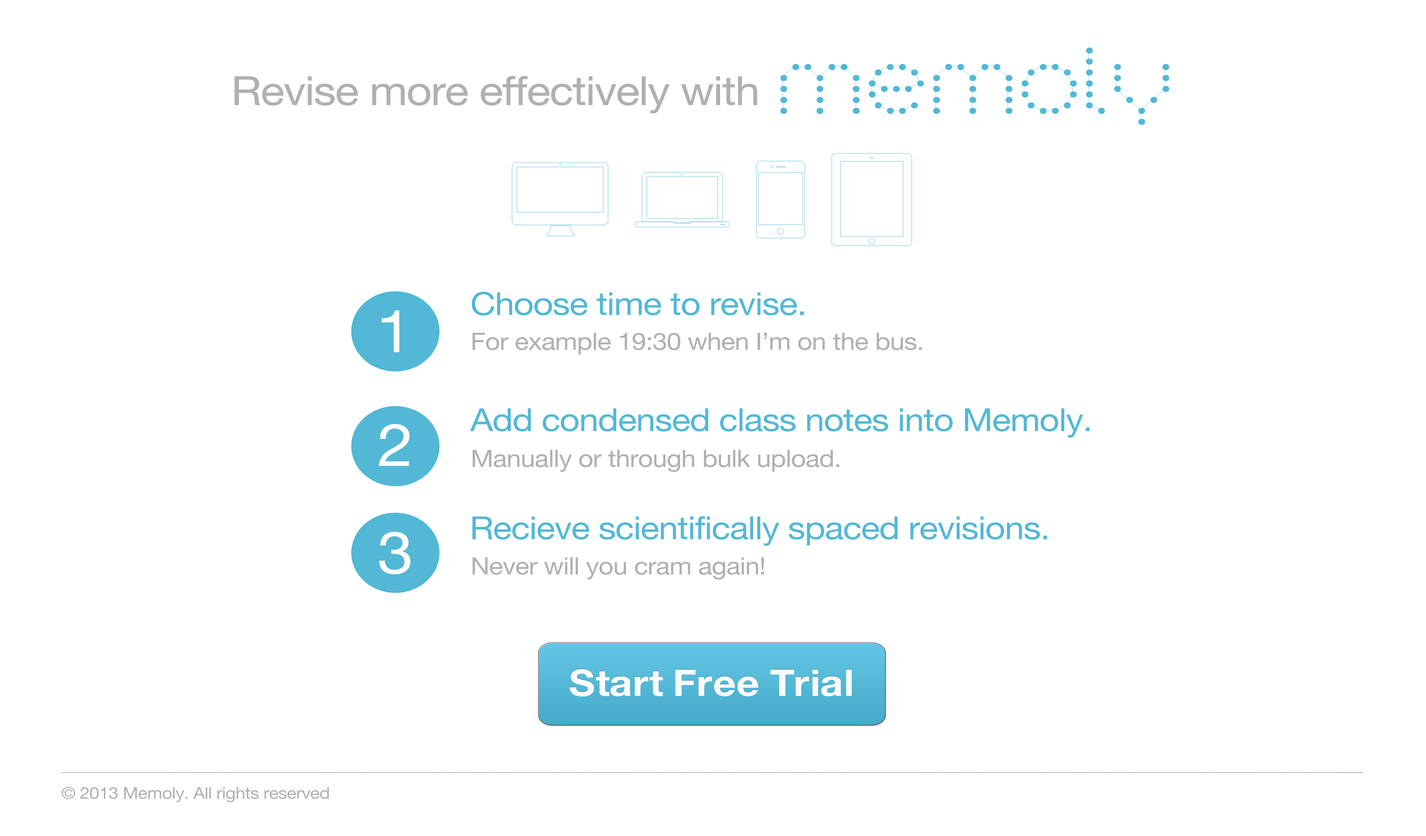
<style>
.page{position:relative;width:1426px;height:836px;background:#ffffff}
.page>*{position:absolute;margin:0}
.t1{font:40.3px "HelveticaNeue";letter-spacing:-0.02em;color:#b0b0b0;scale:1.1 1}
.t2{font:31.9px "HelveticaNeue";letter-spacing:-0.02em;color:#52b8d5;scale:1.1 1}
.t3{font:58.9px "HelveticaNeue";letter-spacing:-0.02em;color:#fefdfd;scale:1.1 1}
.t4{font:23.9px "HelveticaNeue";letter-spacing:-0.02em;color:#b0b0b0;scale:1.1 1}
.t5{font:36.6px "HelveticaNeue-Bold";color:#fcfcfc;scale:1.1 1}
.t6{font:16.2px "HelveticaNeue";letter-spacing:-0.02em;color:#b0b0b0;scale:1.1 1}
</style>
<div class="page">
<p class="t1" style="left:234px;top:76px;width:523px;height:38px">Revise more effectively with</p>
<p class="t2" style="left:472px;top:292px;width:332px;height:24px">Choose time to revise.</p>
<p class="t3" style="left:381px;top:311px;width:18px;height:42px">1</p>
<p class="t4" style="left:472px;top:333px;width:450px;height:22px">For example 19:30 when I’m on the bus.</p>
<p class="t2" style="left:470px;top:408px;width:620px;height:30px">Add condensed class notes into Memoly.</p>
<p class="t3" style="left:379px;top:424px;width:30px;height:42px">2</p>
<p class="t4" style="left:472px;top:450px;width:367px;height:22px">Manually or through bulk upload.</p>
<p class="t2" style="left:472px;top:516px;width:575px;height:30px">Recieve scientifically spaced revisions.</p>
<p class="t3" style="left:379px;top:532px;width:31px;height:43px">3</p>
<p class="t4" style="left:472px;top:557px;width:292px;height:23px">Never will you cram again!</p>
<p class="t5" style="left:569px;top:669px;width:283px;height:28px">Start Free Trial</p>
<p class="t6" style="left:62px;top:787px;width:267px;height:16px">© 2013 Memoly. All rights reserved</p>
</div>
